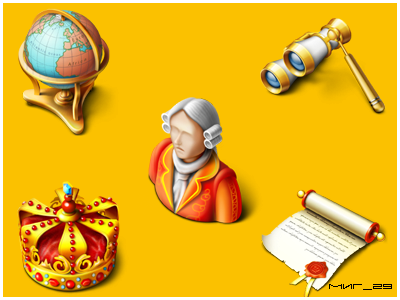
<style>
.page{position:relative;width:400px;height:300px;background:#fbc100}
.page>*{position:absolute;margin:0}
.t1{font:8.3px "SK-Porsche";color:#000000}
</style>
<div class="page">
<p class="t1" style="left:329px;top:284px;width:63px;height:6px">Миг_29</p>
</div>
